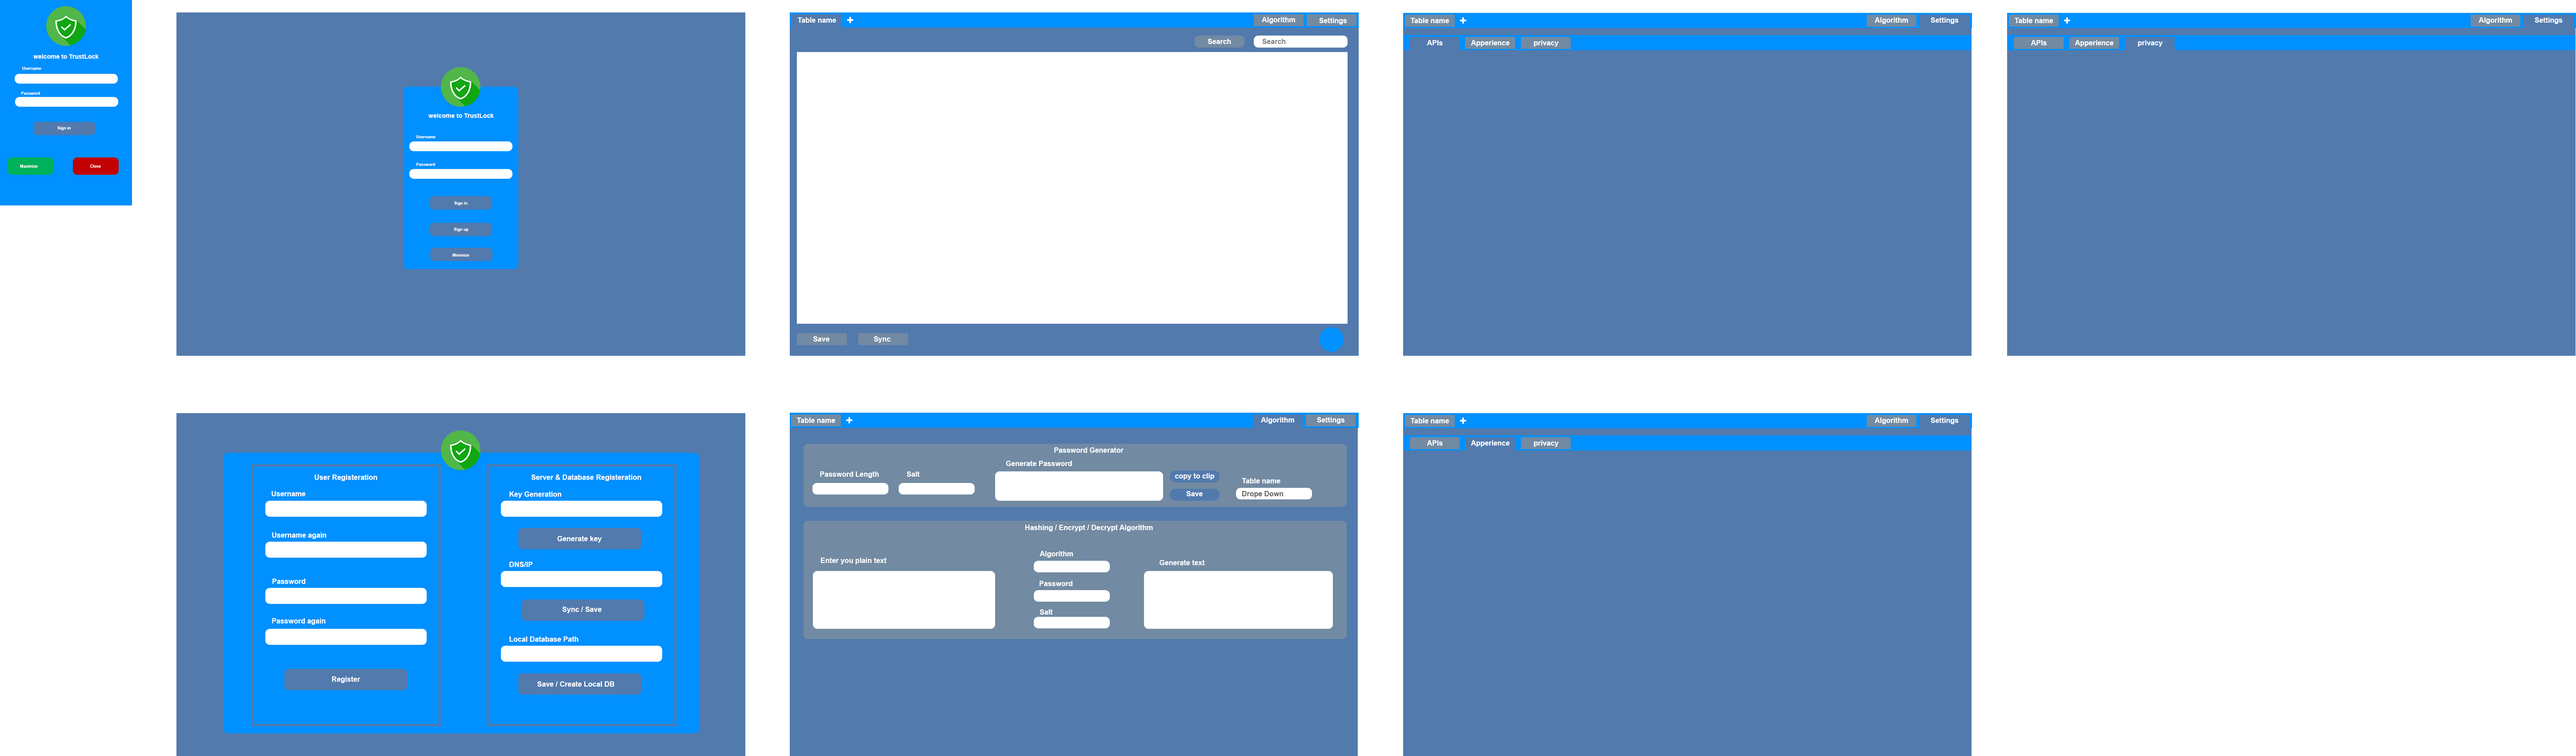
<style>
.page{position:relative;width:2576px;height:756px;background:#527aad}
.page>*{position:absolute;margin:0}
.t1{font:7.1px "Arial-BoldMT";color:#ffffff}
.t2{font:12px "Arial-BoldMT";color:#ffffff}
.t3{font:7.1px "Arial-BoldMT";color:#7e7e7e}
.t4{font:6.2px "Arial-BoldMT";color:#ffffff}
.t5{font:4px "Arial-BoldMT";color:#ffffff}
.t6{font:7.1px "Arial-BoldMT";color:#626060}
</style>
<div class="page">
<p class="t1" style="left:798px;top:17px;width:38px;height:6px">Table name</p>
<p class="t2" style="left:847px;top:17px;width:6px;height:6px">+</p>
<p class="t1" style="left:1262px;top:17px;width:33px;height:7px">Algorithm</p>
<p class="t1" style="left:1319px;top:18px;width:28px;height:6px">Settings</p>
<p class="t1" style="left:1411px;top:18px;width:38px;height:5px">Table name</p>
<p class="t2" style="left:1460px;top:17px;width:6px;height:7px">+</p>
<p class="t1" style="left:1875px;top:17px;width:33px;height:7px">Algorithm</p>
<p class="t1" style="left:1931px;top:17px;width:28px;height:7px">Settings</p>
<p class="t1" style="left:2015px;top:18px;width:38px;height:5px">Table name</p>
<p class="t2" style="left:2064px;top:17px;width:6px;height:7px">+</p>
<p class="t1" style="left:2479px;top:17px;width:33px;height:7px">Algorithm</p>
<p class="t1" style="left:2535px;top:17px;width:28px;height:7px">Settings</p>
<p class="t1" style="left:1208px;top:39px;width:23px;height:5px">Search</p>
<p class="t3" style="left:1262px;top:39px;width:24px;height:5px">Search</p>
<p class="t1" style="left:1427px;top:40px;width:16px;height:5px">APIs</p>
<p class="t1" style="left:1471px;top:40px;width:39px;height:7px">Apperience</p>
<p class="t1" style="left:1534px;top:40px;width:25px;height:7px">privacy</p>
<p class="t1" style="left:2031px;top:40px;width:16px;height:5px">APIs</p>
<p class="t1" style="left:2075px;top:40px;width:39px;height:7px">Apperience</p>
<p class="t1" style="left:2138px;top:40px;width:25px;height:7px">privacy</p>
<p class="t4" style="left:33px;top:54px;width:66px;height:5px">welcome to TrustLock</p>
<p class="t5" style="left:22px;top:67px;width:19px;height:3px">Username</p>
<p class="t5" style="left:21px;top:92px;width:19px;height:3px">Password</p>
<p class="t4" style="left:428px;top:113px;width:66px;height:5px">welcome to TrustLock</p>
<p class="t5" style="left:57px;top:126px;width:14px;height:4px">Sign in</p>
<p class="t5" style="left:416px;top:135px;width:20px;height:3px">Username</p>
<p class="t5" style="left:20px;top:164px;width:18px;height:4px">Maximize</p>
<p class="t5" style="left:90px;top:164px;width:11px;height:4px">Close</p>
<p class="t5" style="left:416px;top:163px;width:19px;height:3px">Password</p>
<p class="t5" style="left:454px;top:201px;width:14px;height:4px">Sign in</p>
<p class="t5" style="left:454px;top:228px;width:14px;height:4px">Sign up</p>
<p class="t5" style="left:452px;top:253px;width:17px;height:3px">Minimize</p>
<p class="t1" style="left:813px;top:336px;width:17px;height:5px">Save</p>
<p class="t1" style="left:874px;top:336px;width:17px;height:7px">Sync</p>
<p class="t1" style="left:797px;top:417px;width:39px;height:6px">Table name</p>
<p class="t2" style="left:846px;top:417px;width:6px;height:6px">+</p>
<p class="t1" style="left:1261px;top:417px;width:33px;height:7px">Algorithm</p>
<p class="t1" style="left:1317px;top:417px;width:28px;height:7px">Settings</p>
<p class="t1" style="left:1411px;top:418px;width:38px;height:5px">Table name</p>
<p class="t2" style="left:1460px;top:417px;width:6px;height:7px">+</p>
<p class="t1" style="left:1875px;top:417px;width:33px;height:7px">Algorithm</p>
<p class="t1" style="left:1931px;top:417px;width:28px;height:7px">Settings</p>
<p class="t1" style="left:1054px;top:447px;width:70px;height:5px">Password Generator</p>
<p class="t1" style="left:1427px;top:440px;width:16px;height:5px">APIs</p>
<p class="t1" style="left:1471px;top:440px;width:39px;height:7px">Apperience</p>
<p class="t1" style="left:1534px;top:440px;width:25px;height:7px">privacy</p>
<p class="t1" style="left:1006px;top:460px;width:66px;height:6px">Generate Password</p>
<p class="t1" style="left:820px;top:471px;width:59px;height:7px">Password Length</p>
<p class="t1" style="left:907px;top:471px;width:13px;height:5px">Salt</p>
<p class="t1" style="left:1175px;top:473px;width:39px;height:7px">copy to clip</p>
<p class="t1" style="left:315px;top:474px;width:62px;height:7px">User Registeration</p>
<p class="t1" style="left:531px;top:474px;width:110px;height:7px">Server &amp; Database Registeration</p>
<p class="t1" style="left:1242px;top:478px;width:38px;height:5px">Table name</p>
<p class="t1" style="left:272px;top:491px;width:34px;height:5px">Username</p>
<p class="t1" style="left:509px;top:491px;width:52px;height:7px">Key Generation</p>
<p class="t1" style="left:1186px;top:491px;width:17px;height:5px">Save</p>
<p class="t6" style="left:1242px;top:491px;width:42px;height:6px">Drope Down</p>
<p class="t1" style="left:272px;top:532px;width:54px;height:7px">Username again</p>
<p class="t1" style="left:1025px;top:524px;width:128px;height:7px">Hashing / Encrypt / Decrypt Algorithm</p>
<p class="t1" style="left:557px;top:536px;width:45px;height:6px">Generate key</p>
<p class="t1" style="left:821px;top:557px;width:66px;height:7px">Enter you plain text</p>
<p class="t1" style="left:1040px;top:551px;width:33px;height:6px">Algorithm</p>
<p class="t1" style="left:509px;top:561px;width:24px;height:6px">DNS/IP</p>
<p class="t1" style="left:1160px;top:560px;width:45px;height:5px">Generate text</p>
<p class="t1" style="left:272px;top:578px;width:33px;height:6px">Password</p>
<p class="t1" style="left:1040px;top:580px;width:32px;height:6px">Password</p>
<p class="t1" style="left:272px;top:618px;width:54px;height:6px">Password again</p>
<p class="t1" style="left:562px;top:606px;width:40px;height:7px">Sync / Save</p>
<p class="t1" style="left:1040px;top:609px;width:13px;height:5px">Salt</p>
<p class="t1" style="left:509px;top:636px;width:70px;height:5px">Local Database Path</p>
<p class="t1" style="left:332px;top:676px;width:28px;height:7px">Register</p>
<p class="t1" style="left:537px;top:681px;width:77px;height:5px">Save / Create Local DB</p>
</div>
